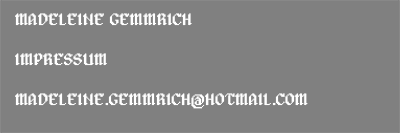
<style>
.page{position:relative;width:400px;height:133px;background:#808080}
.page>*{position:absolute;margin:0}
.t1{font:16.7px "Alagard";color:#ffffff;text-transform:uppercase}
</style>
<div class="page">
<p class="t1" style="left:15px;top:13px;width:293px;height:96px">Madeleine Gemmrich<br><br>Impressum<br><br>madeleine.gemmrich@hotmail.com</p>
</div>
